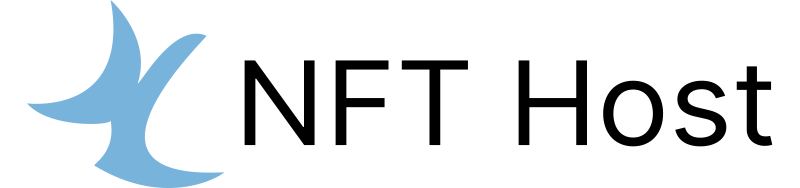
<style>
.page{position:relative;width:800px;height:188px;background:#ffffff}
.page>*{position:absolute;margin:0}
.t1{font:116.3px "Inter-Regular";color:#000000;scale:1.04 1}
</style>
<div class="page">
<p class="t1" style="left:244px;top:60px;width:529px;height:87px">NFT Host</p>
</div>
